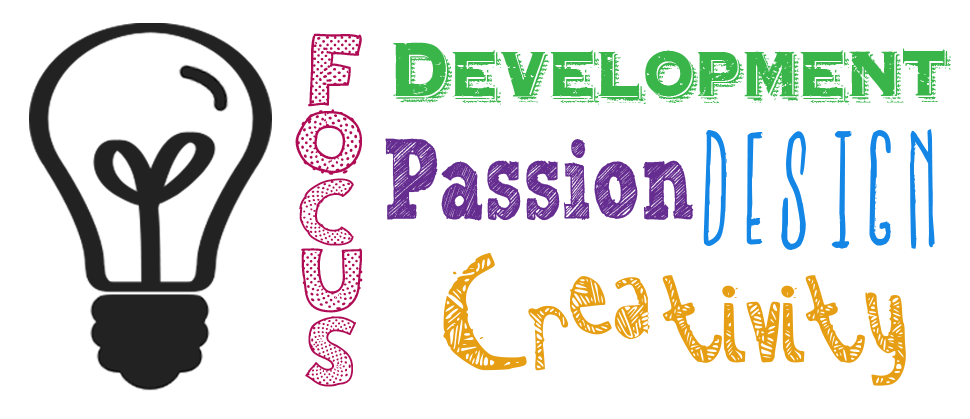
<style>
.page{position:relative;width:970px;height:419px;background:#ffffff}
.page>*{position:absolute;margin:0}
.t1{font:100px "StefanieDots-Bold";color:#af0c55}
.t2{font:72px "Hooverville";color:#39b54a}
.t3{font:90px "StefanieDots-Bold";color:#af0c55}
.t4{font:125px "IronFurnaces-Regular";color:#1486e6}
.t5{font:72px "IronFurnaces-Regular";color:#e69e14}
.t6{font:113.5px "SketchRockwell";color:#662d91;scale:0.7 1}
.t7{font:119px "Zebrairregular";color:#e69e14}
.t8{font:150px "Zebrairregular";color:#e69e14}
.t9{font:95px "StefanieDots-Bold";color:#af0c55}
</style>
<div class="page">
<p class="t1" style="left:308px;top:33px;width:54px;height:74px">F</p>
<p class="t2" style="left:393px;top:42px;width:558px;height:63px">Development</p>
<p class="t3" style="left:295px;top:109px;width:67px;height:66px">O</p>
<p class="t4" style="left:703px;top:129px;width:232px;height:121px"><span class="t5">           </span>Design</p>
<p class="t6" style="left:385px;top:138px;width:309px;height:83px">Passion</p>
<p class="t3" style="left:299px;top:178px;width:55px;height:68px">C</p>
<p class="t3" style="left:301px;top:248px;width:62px;height:65px">U</p>
<p class="t7" style="left:443px;top:252px;width:207px;height:119px"><span class="t8">C</span>rea</p>
<p class="t7" style="left:662px;top:275px;width:244px;height:111px">tivity</p>
<p class="t9" style="left:305px;top:316px;width:51px;height:71px">S</p>
</div>
